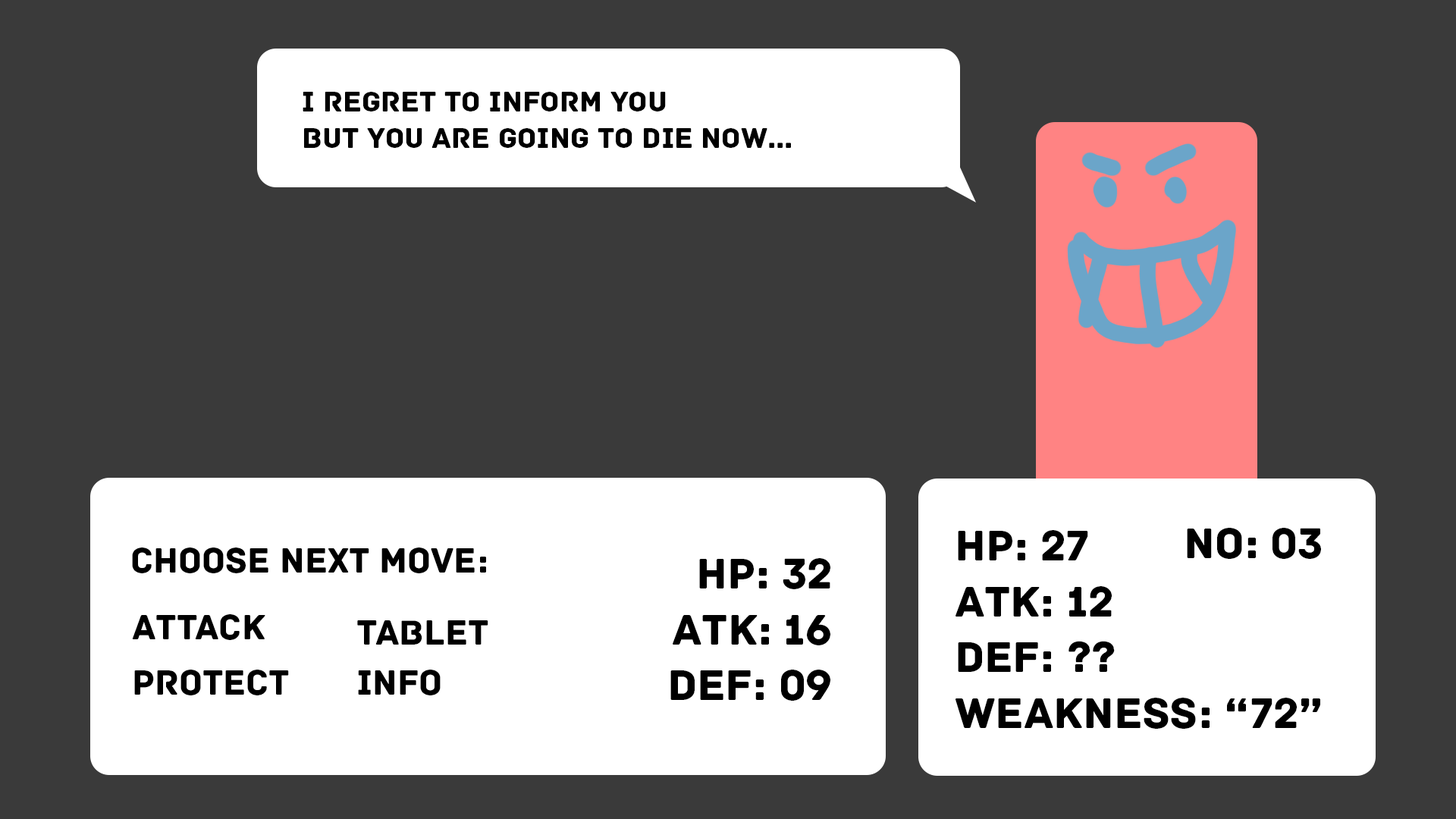
<style>
.page{position:relative;width:1456px;height:819px;background:#3a3a3a}
.page>*{position:absolute;margin:0}
.t1{font:29.8px/36.6px "Archive";color:#000000}
.t2{font:45.4px/55.7px "Archive";color:#000000}
.t3{font:45.4px "Archive";color:#000000}
.t4{font:36.4px "Archive";color:#000000}
</style>
<div class="page">
<p class="t1" style="left:303px;top:92px;width:488px;height:56px">I regret to inform you<br>But you are going to die now...</p>
<p class="t2" style="left:955px;top:530px;width:365px;height:199px">HP: 27<br>Atk: 12<br>Def: ??<br>Weakness: “72”</p>
<p class="t3" style="left:1187px;top:528px;width:134px;height:31px">no: 03</p>
<p class="t4" style="left:132px;top:548px;width:354px;height:25px">Choose next move:</p>
<p class="t2" style="left:670px;top:558px;width:160px;height:143px;text-align:right">HP: 32<br>Atk: 16<br>Def: 09</p>
<p class="t4" style="left:132px;top:614px;width:133px;height:26px">Attack</p>
<p class="t4" style="left:357px;top:620px;width:131px;height:25px">Tablet</p>
<p class="t4" style="left:134px;top:670px;width:155px;height:25px">Protect</p>
<p class="t4" style="left:358px;top:670px;width:83px;height:25px">Info</p>
</div>
